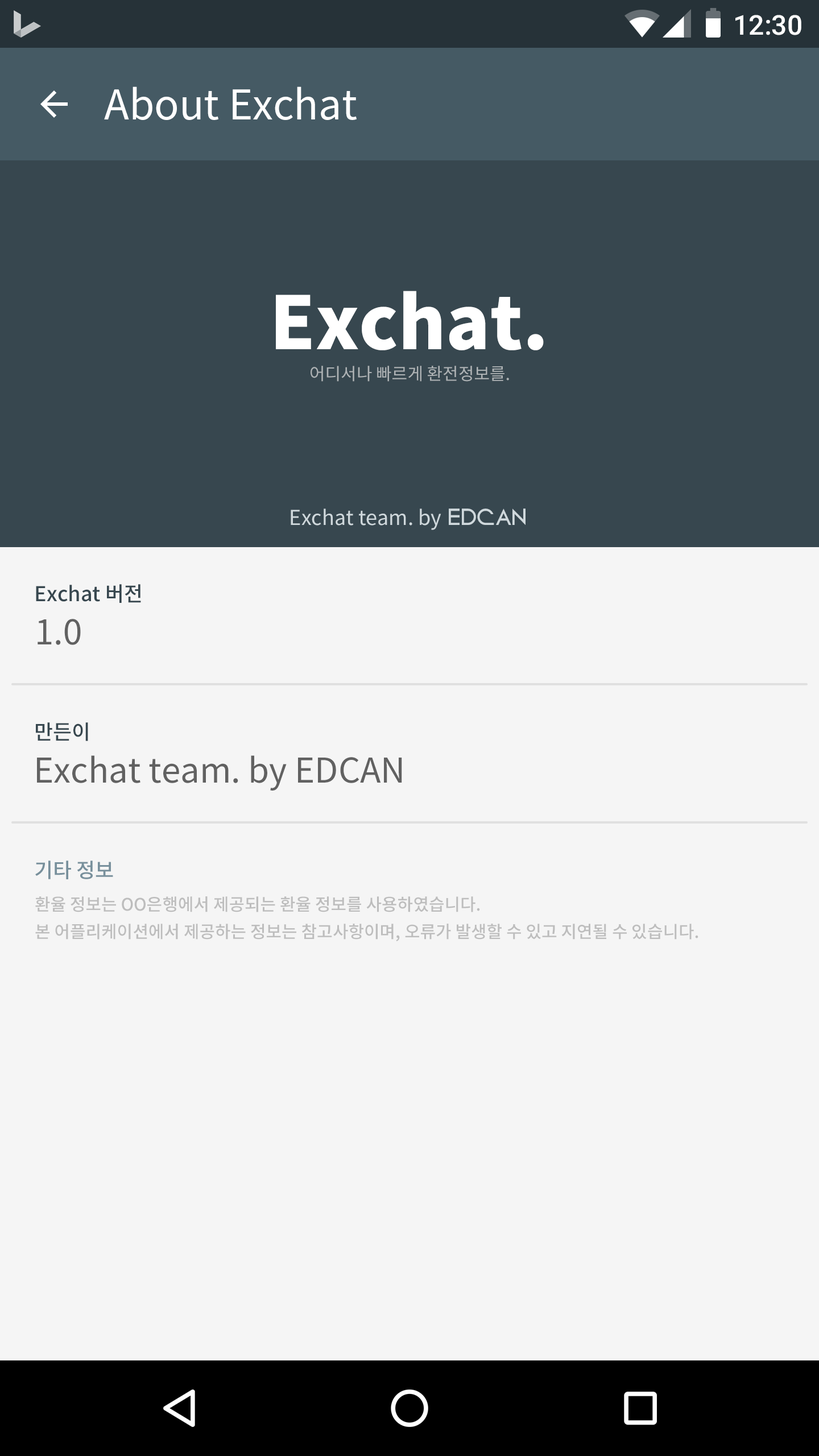
<style>
.page{position:relative;width:819px;height:1456px;background:#f5f5f5}
.page>*{position:absolute;margin:0}
.t1{font:27.3px "Roboto-Medium";color:#ffffff}
.t2{font:40.9px "NotoSansCJKkr-Regular";color:#ffffff}
.t3{font:72.8px "NotoSansCJKkr-Black";color:#ffffff}
.t4{font:17.1px "NotoSansCJKkr-Regular";color:#aeb3b5}
.t5{font:20.5px "NotoSansCJKkr-Regular";color:#cfd8dc}
.t6{font:17.1px "Circo";color:#cfd8dc}
.t7{font:20.5px "NotoSansCJKkr-Medium";color:#37474f}
.t8{font:34.1px "NotoSansCJKkr-Regular";color:#616161}
.t9{font:20.5px "NotoSansCJKkr-Medium";color:#78909c}
.t10{font:17.1px/27.3px "NotoSansCJKkr-Medium";color:#bdbdbd}
</style>
<div class="page">
<p class="t1" style="left:735px;top:15px;width:66px;height:20px">12:30</p>
<p class="t2" style="left:104px;top:86px;width:253px;height:34px">About Exchat</p>
<p class="t3" style="left:276px;top:291px;width:268px;height:59px">Exchat.</p>
<p class="t4" style="left:311px;top:366px;width:198px;height:16px">어디서나 빠르게 환전정보를.</p>
<p class="t5" style="left:291px;top:508px;width:235px;height:22px">Exchat team. by  <span class="t6">EDCAN</span></p>
<p class="t7" style="left:36px;top:584px;width:105px;height:19px">Exchat 버전</p>
<p class="t8" style="left:38px;top:619px;width:43px;height:26px">1.0</p>
<p class="t7" style="left:36px;top:722px;width:52px;height:19px">만든이</p>
<p class="t8" style="left:37px;top:755px;width:365px;height:36px">Exchat team. by EDCAN</p>
<p class="t9" style="left:35px;top:861px;width:78px;height:18px">기타 정보</p>
<p class="t10" style="left:35px;top:896px;width:663px;height:45px">환율 정보는 OO은행에서 제공되는 환율 정보를 사용하였습니다.<br>본 어플리케이션에서 제공하는 정보는 참고사항이며, 오류가 발생할 수 있고 지연될 수 있습니다.</p>
</div>
